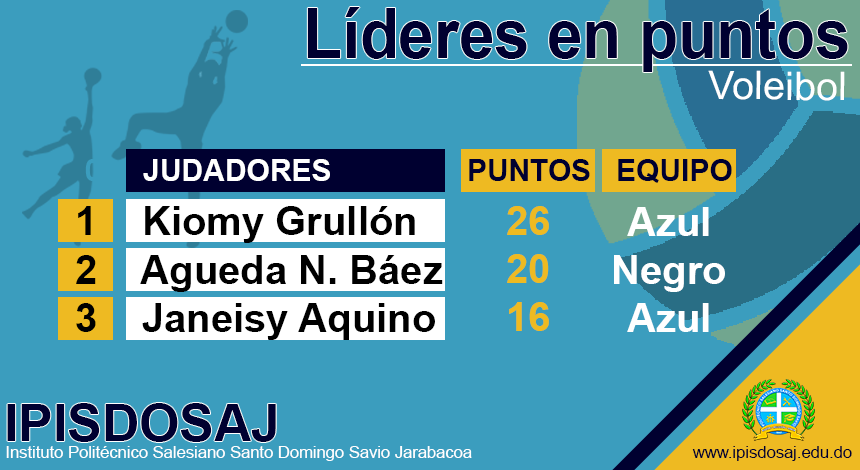
<style>
.page{position:relative;width:860px;height:470px;background:#3b9dbe}
.page>*{position:absolute;margin:0}
.t1{font:69.8px "Arial-BoldMT";color:#000030;scale:0.91 1}
.t2{font:39.5px "ArialMT";color:#ffffff}
.t3{font:30px "Arial-BoldMT";color:#ffffff}
.t4{font:30px "Arial-BoldMT";color:#3b9dbe}
.t5{font:30px "Arial-BoldMT";color:#000030}
.t6{font:40px "Arial-BoldMT";color:#000000}
.t7{font:40px "Arial-BoldMT";color:#eeba22}
.t8{font:40px "Arial-BoldMT";color:#ffffff}
.t9{font:51.7px "Arial-BoldMT";color:#000030}
.t10{font:16.6px "ArialMT";color:#ffffff}
.t11{font:16.6px "ArialMT";color:#000030}
</style>
<div class="page">
<p class="t1" style="left:307px;top:7px;width:541px;height:65px">Líderes en puntos</p>
<p class="t2" style="left:708px;top:70px;width:137px;height:31px">Voleibol</p>
<p class="t3" style="left:85px;top:159px;width:245px;height:22px"><span class="t4">0     </span>JUDADORES</p>
<p class="t5" style="left:469px;top:159px;width:263px;height:24px">PUNTOS   EQUIPO</p>
<p class="t6" style="left:78px;top:206px;width:337px;height:37px">1    Kiomy Grullón</p>
<p class="t7" style="left:507px;top:206px;width:42px;height:125px;text-align:center">26<br>20<br>16</p>
<p class="t8" style="left:614px;top:207px;width:111px;height:125px;text-align:center">Azul<br>Negro<br>Azul</p>
<p class="t6" style="left:76px;top:255px;width:367px;height:37px">2    Agueda N. Báez</p>
<p class="t6" style="left:76px;top:303px;width:359px;height:37px">3    Janeisy Aquino</p>
<p class="t9" style="left:7px;top:403px;width:269px;height:39px">IPISDOSAJ</p>
<p class="t10" style="left:6px;top:446px;width:846px;height:15px">Instituto Politécnico Salesiano Santo Domingo Savio Jarabacoa                                                <span class="t11">www.ipisdosaj.edu.do</span></p>
</div>
